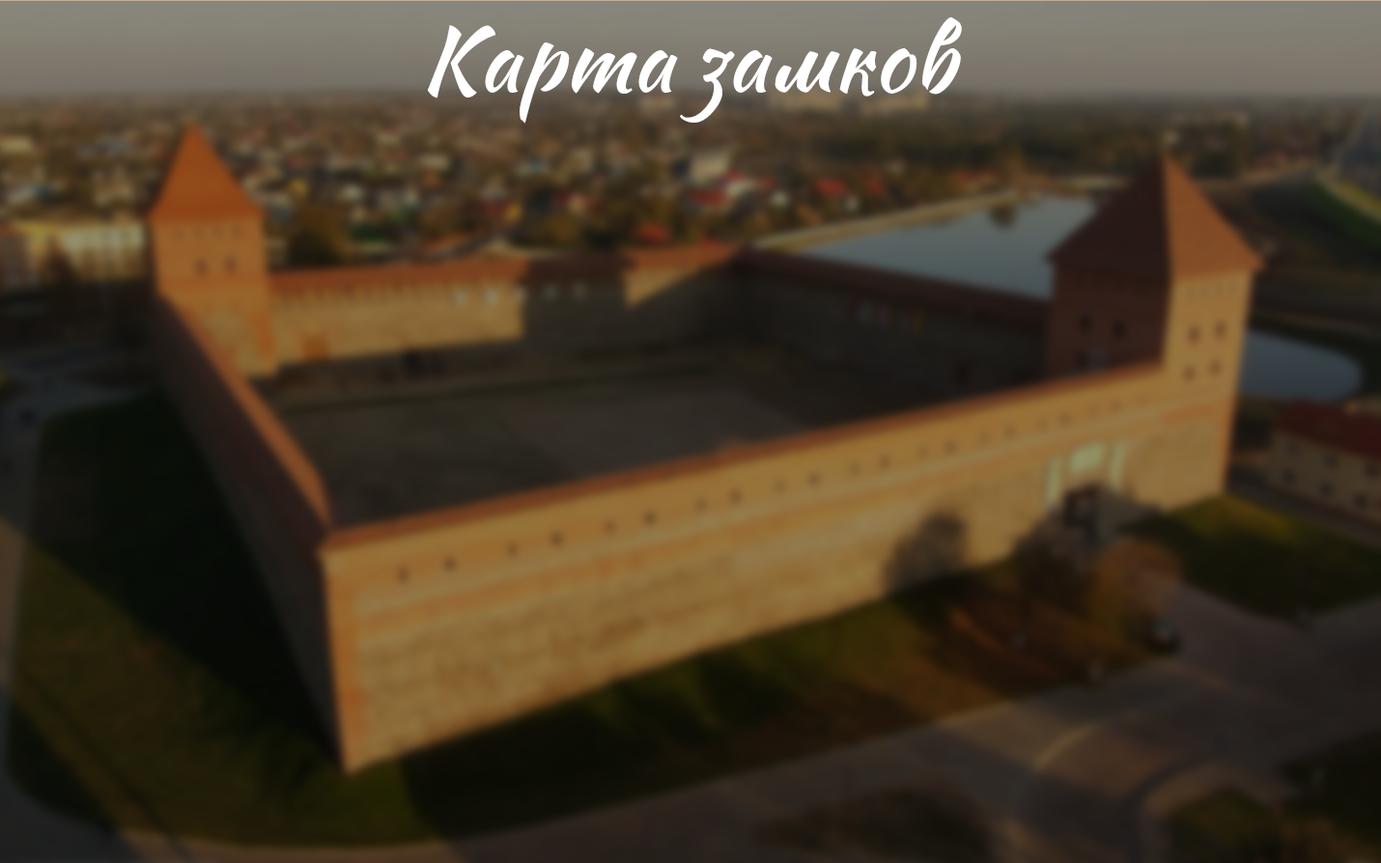
<style>
.page{position:relative;width:1381px;height:863px}
.page>*{position:absolute;margin:0}
.t1{font:88.4px "Sweet-Mavka-Script";color:#ffffff}
</style>
<div class="page">
<p class="t1" style="left:427px;top:16px;width:535px;height:108px">Карта замков</p>
</div>
